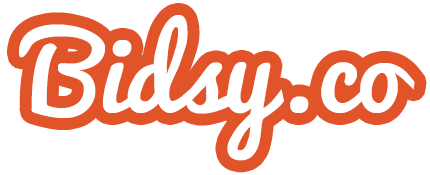
<style>
.page{position:relative;width:430px;height:175px;background:#ffffff}
.page>*{position:absolute;margin:0}
.t1{font:104.6px "Pacifico";color:#ffffff}
</style>
<div class="page">
<p class="t1" style="left:19px;top:15px;width:396px;height:146px">Bidsy.co</p>
</div>
